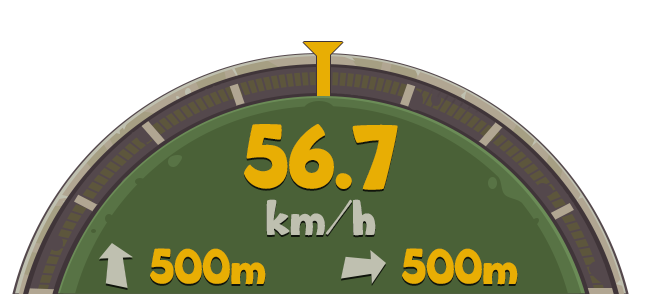
<style>
.page{position:relative;width:645px;height:294px;background:#ffffff}
.page>*{position:absolute;margin:0}
.t1{font:55px "Big_Bottom_Cartoon";color:#e8ae04}
.t2{font:30px "Big_Bottom_Cartoon";color:#bfc0b0}
.t3{font:55px "Big_Bottom_Cartoon";color:#bfc0b0}
.t4{font:30px "Big_Bottom_Cartoon";color:#e8ae04}
</style>
<div class="page">
<p class="t1" style="left:244px;top:124px;width:154px;height:66px">56.7</p>
<p class="t2" style="left:266px;top:199px;width:110px;height:37px"><span class="t3"><br></span>km/h</p>
<p class="t4" style="left:150px;top:248px;width:116px;height:37px">500m</p>
<p class="t4" style="left:402px;top:248px;width:116px;height:37px">500m</p>
</div>
